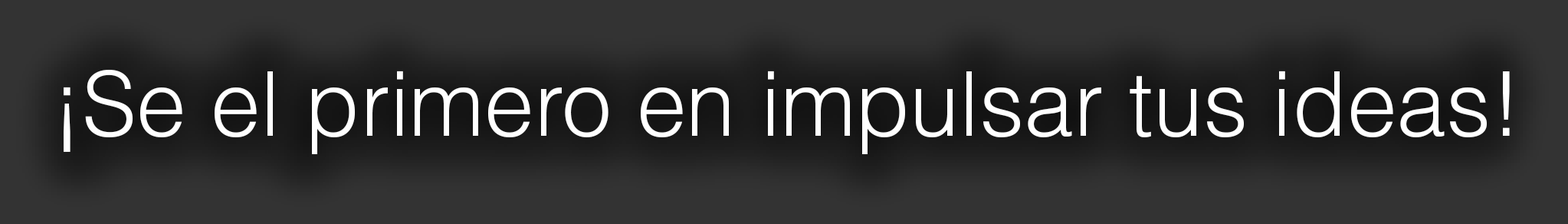
<style>
.page{position:relative;width:1568px;height:224px;background:#333333}
.page>*{position:absolute;margin:0}
.t1{font:89.4px "HelveticaLTStd-Light";color:#ffffff}
</style>
<div class="page">
<p class="t1" style="left:64px;top:70px;width:1446px;height:84px">¡Se el primero en impulsar tus ideas!</p>
</div>
